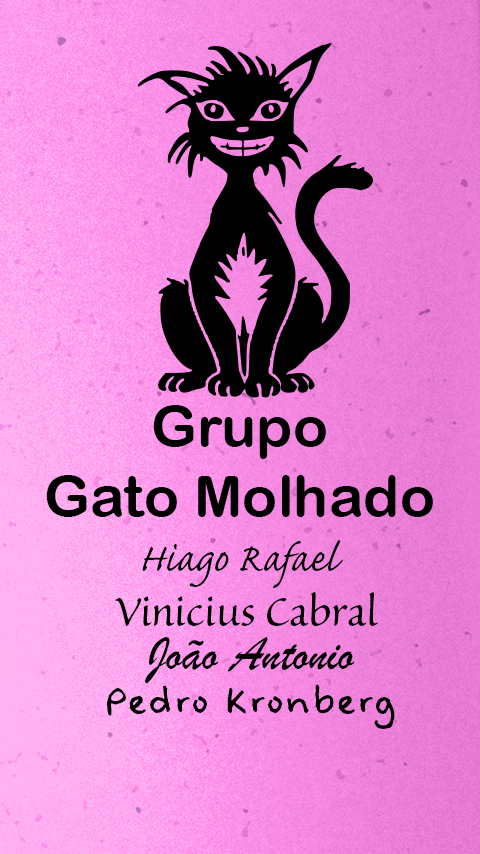
<style>
.page{position:relative;width:480px;height:854px}
.page>*{position:absolute;margin:0}
.t1{font:58.4px "ArialRoundedMTBold";color:#000000}
.t2{font:50px "CaflischScriptPro-Regular";color:#000000}
.t3{font:50px "SanvitoPro-Regular";color:#000000}
.t4{font:50px "BrushScriptMT";color:#000000}
.t5{font:50px "FeltTipWoman";color:#000000}
</style>
<div class="page">
<p class="t1" style="left:46px;top:405px;width:387px;height:112px;text-align:center">Grupo <br>Gato Molhado</p>
<p class="t2" style="left:142px;top:540px;width:201px;height:48px">Hiago Rafael</p>
<p class="t3" style="left:115px;top:592px;width:263px;height:34px">Vinicius Cabral</p>
<p class="t4" style="left:145px;top:636px;width:209px;height:48px">João Antonio</p>
<p class="t5" style="left:107px;top:684px;width:288px;height:45px">Pedro Kronberg</p>
</div>
